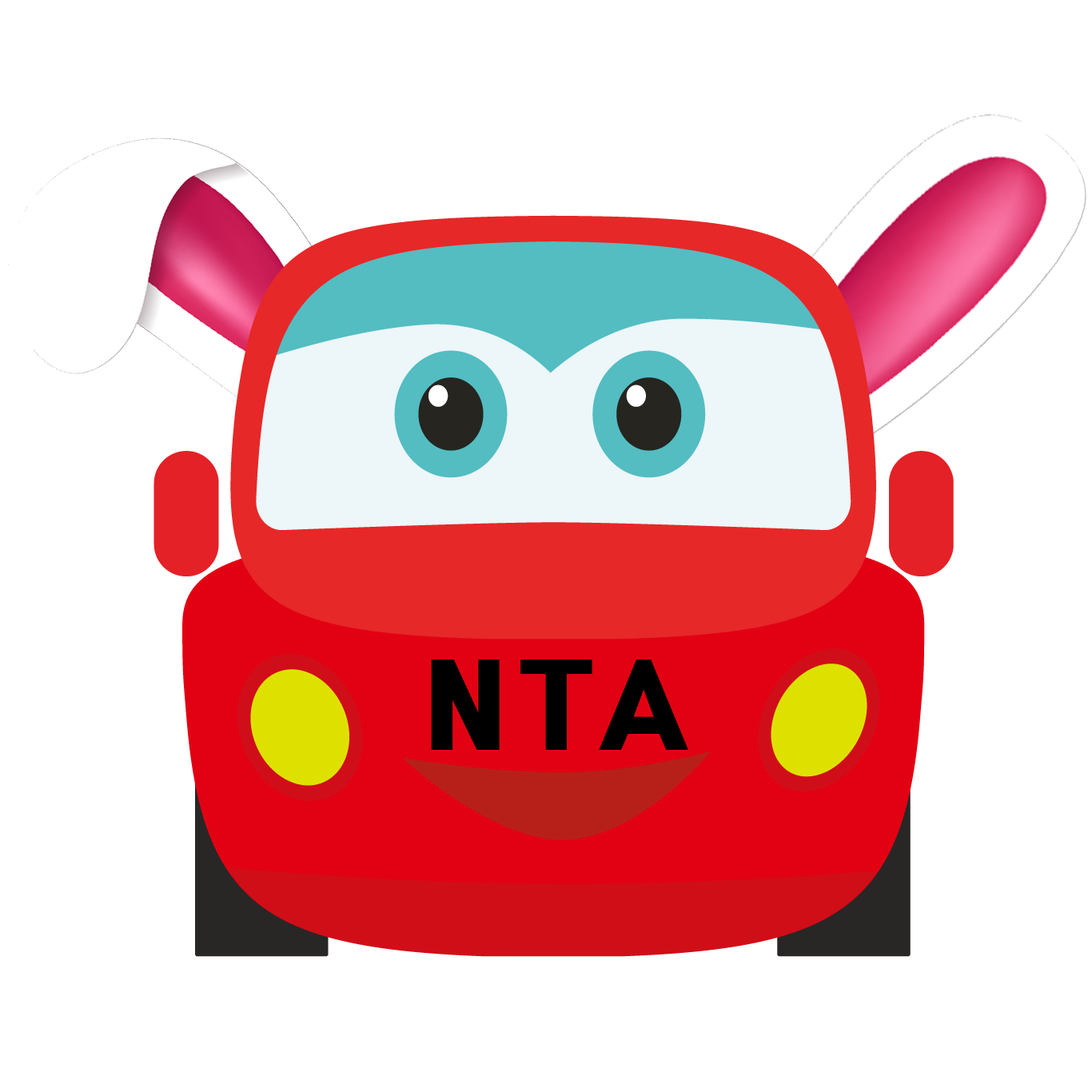
<style>
.page{position:relative;width:1092px;height:1092px;background:#ffffff}
.page>*{position:absolute;margin:0}
.t1{font:103.9px "HeadlineR-HM";color:#000000}
</style>
<div class="page">
<p class="t1" style="left:431px;top:660px;width:69px;height:90px">N</p>
<p class="t1" style="left:520px;top:660px;width:168px;height:90px">TA</p>
</div>
